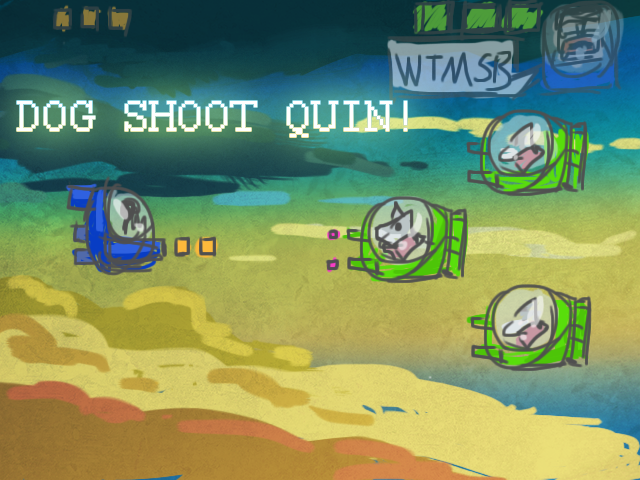
<style>
.page{position:relative;width:640px;height:480px}
.page>*{position:absolute;margin:0}
.t1{font:48px "Courier";color:#ffffff}
</style>
<div class="page">
<p class="t1" style="left:17px;top:101px;width:390px;height:36px">DOG SHOOT QUIN!</p>
</div>
